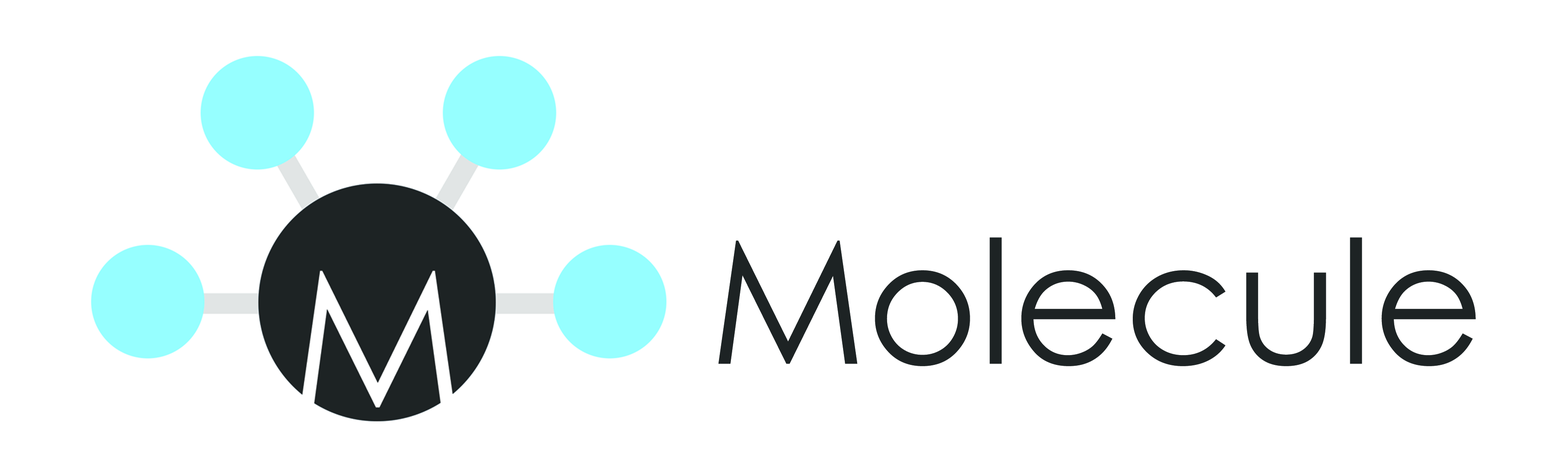
<style>
.page{position:relative;width:1568px;height:475px;background:#ffffff}
.page>*{position:absolute;margin:0}
.t1{font:171.2px "CenturyGothic";color:#1d2324}
</style>
<div class="page">
<p class="t1" style="left:718px;top:237px;width:758px;height:129px">Molecule</p>
</div>
